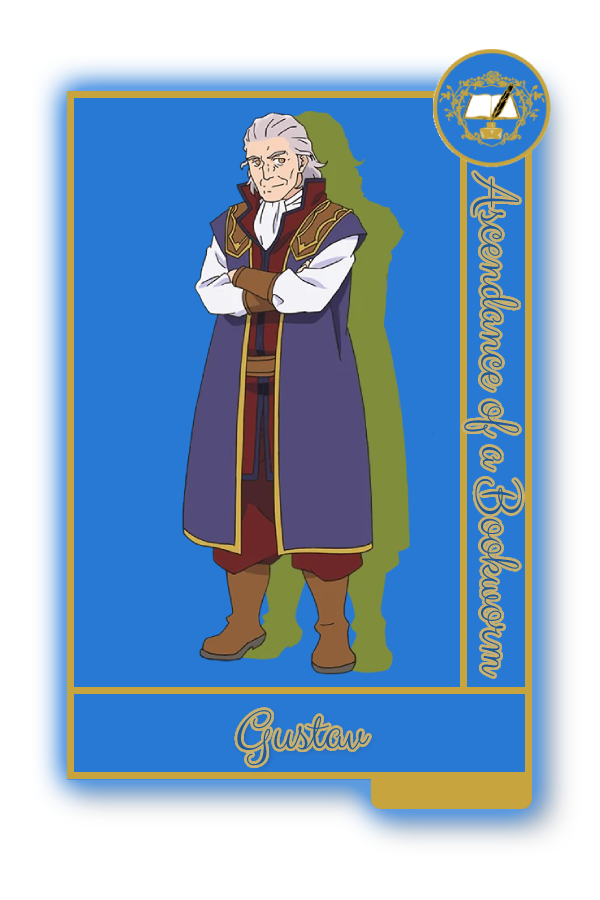
<style>
.page{position:relative;width:600px;height:900px;background:#2879d4}
.page>*{position:absolute;margin:0}
.t1{font:58px "ClickerScript-Regular";color:#1d599c}
.t2{font:60px "ClickerScript-Regular";color:#1d599c}
</style>
<div class="page">
<p class="t1" style="left:464px;top:172px;width:59px;height:505px;rotate:90deg">Ascendance of a Bookworm</p>
<p class="t2" style="left:237px;top:710px;width:133px;height:56px">Gustav</p>
</div>
